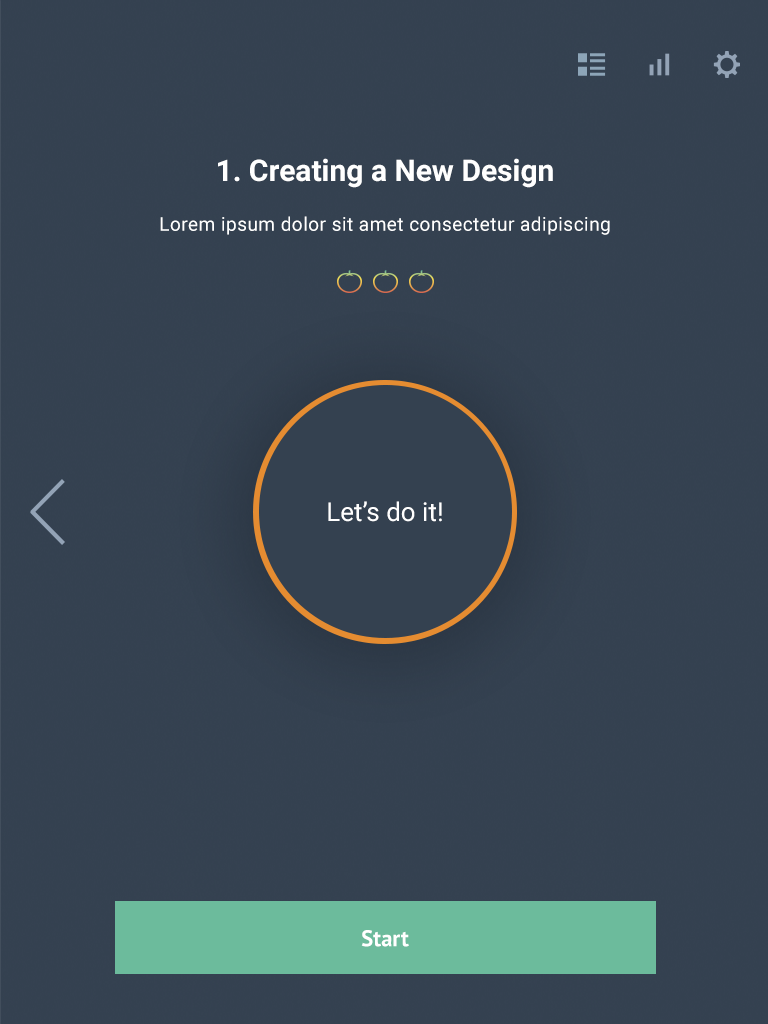
<style>
.page{position:relative;width:768px;height:1024px;background:#344150}
.page>*{position:absolute;margin:0}
.t1{font:30px "Roboto-Bold";color:#ffffff}
.t2{font:19px "Roboto-Regular";letter-spacing:0.025em;color:#ffffff}
.t3{font:26px "Roboto-Regular";color:#ffffff}
.t4{font:22.6px "PTSans-Bold";color:#ffffff}
</style>
<div class="page">
<p class="t1" style="left:218px;top:158px;width:335px;height:30px">1. Creating a New Design</p>
<p class="t2" style="left:160px;top:216px;width:450px;height:19px">Lorem ipsum dolor sit amet consectetur adipiscing</p>
<p class="t3" style="left:328px;top:501px;width:114px;height:21px">Let’s do it!</p>
<p class="t4" style="left:361px;top:930px;width:48px;height:17px">Start</p>
</div>
